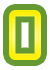
<style>
.page{position:relative;width:50px;height:70px;background:#669933}
.page>*{position:absolute;margin:0}
.t1{font:64px "OCRAStd"}
</style>
<div class="page">
<p class="t1" style="left:9px;top:10px;width:32px;height:50px">0</p>
</div>
